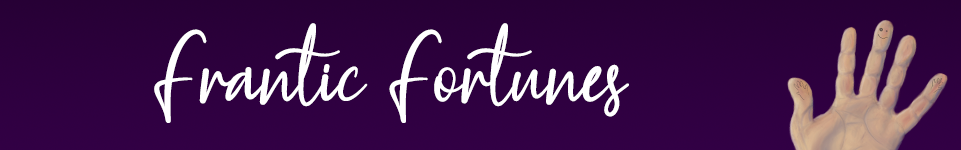
<style>
.page{position:relative;width:961px;height:150px}
.page>*{position:absolute;margin:0}
.t1{font:102.2px "WestayScript";color:#ffffff}
</style>
<div class="page">
<p class="t1" style="left:154px;top:23px;width:475px;height:100px">Frantic Fortunes</p>
</div>
